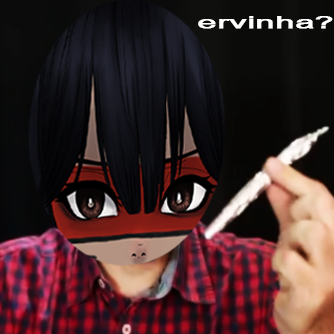
<style>
.page{position:relative;width:334px;height:334px}
.page>*{position:absolute;margin:0}
.t1{font:16.9px "ArialMT";color:#ffffff;font-weight:bold;scale:2 1}
</style>
<div class="page">
<p class="t1" style="left:198px;top:16px;width:135px;height:13px">ervinha?</p>
</div>
